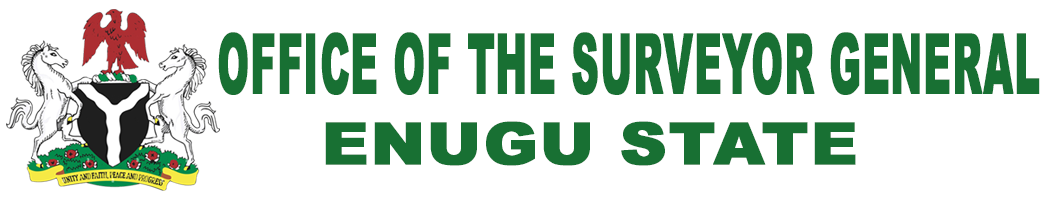
<style>
.page{position:relative;width:1050px;height:200px;background:#ffffff}
.page>*{position:absolute;margin:0}
.t1{font:83.6px "ArialMTBlack";letter-spacing:0.01em;color:#187033;text-transform:uppercase;font-weight:bold;scale:0.45 1}
.t2{font:58.2px "ArialMTBlack";letter-spacing:0.01em;color:#187033;text-transform:uppercase;font-weight:bold;scale:1.11 1}
</style>
<div class="page">
<p class="t1" style="left:218px;top:32px;width:822px;height:63px">OFFICE OF THE SURVEYOR GENERAL</p>
<p class="t2" style="left:325px;top:121px;width:531px;height:45px">ENUGU STATE</p>
</div>
